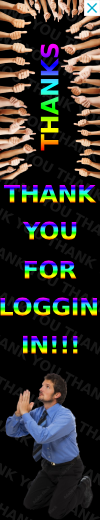
<style>
.page{position:relative;width:100px;height:520px;background:#000000}
.page>*{position:absolute;margin:0}
.t1{font:24px "MontserratRoman-ExtraBold";letter-spacing:-0.02em;text-transform:uppercase}
</style>
<div class="page">
<p class="t1" style="left:40px;top:43px;width:19px;height:108px;rotate:-90deg">thanks</p>
<p class="t1" style="left:3px;top:184px;width:94px;height:19px">thank</p>
<p class="t1" style="left:22px;top:221px;width:55px;height:19px">you</p>
<p class="t1" style="left:24px;top:260px;width:53px;height:19px">FOR</p>
<p class="t1" style="left:0px;top:297px;width:97px;height:19px">LOGGIN</p>
<p class="t1" style="left:22px;top:335px;width:56px;height:19px">in!!!</p>
</div>
